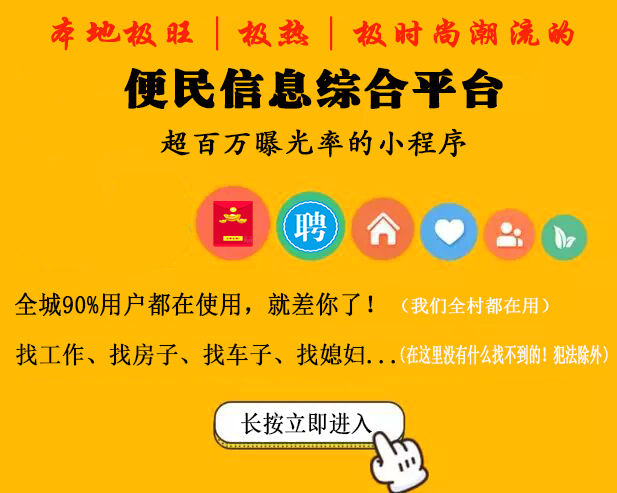
<style>
.page{position:relative;width:617px;height:493px;background:#ffba03}
.page>*{position:absolute;margin:0}
.t1{font:33.9px "CTXingKaiSJ";color:#fb2408;font-weight:bold;scale:1.1 1}
.t2{font:42.8px "HYa0gj";color:#030200;font-weight:bold;scale:1.09 1}
.t3{font:30px "AdobeKaitiStd-Regular";color:#030200;font-weight:bold}
.t4{font:24.9px "SimSun";color:#050400;font-weight:bold;scale:0.94 1}
.t5{font:18px "SimSun";color:#fefdfc;font-weight:bold}
.t6{font:23.9px "SimSun";color:#050400;font-weight:bold;scale:0.95 1}
.t7{font:20.9px "SimSun";color:#fcfbfa;font-weight:bold;scale:0.57 1}
.t8{font:23.9px "SimSun";color:#000000;font-weight:bold;scale:0.9 1}
</style>
<div class="page">
<p class="t1" style="left:51px;top:16px;width:523px;height:35px">本地极旺｜极热｜极时尚潮流的</p>
<p class="t2" style="left:124px;top:67px;width:379px;height:42px">便民信息综合平台</p>
<p class="t3" style="left:160px;top:128px;width:306px;height:30px">超百万曝光率的小程序</p>
<p class="t4" style="left:15px;top:292px;width:358px;height:25px">全城90%用户都在使用，就差你了！</p>
<p class="t5" style="left:402px;top:297px;width:147px;height:17px">（我们全村都在用）</p>
<p class="t6" style="left:16px;top:343px;width:379px;height:23px">找工作、找房子、找车子、找媳妇...</p>
<p class="t7" style="left:400px;top:344px;width:208px;height:21px">（在这里没有什么找不到的！犯法除外）</p>
<p class="t8" style="left:241px;top:412px;width:131px;height:23px">长按立即进入</p>
</div>
